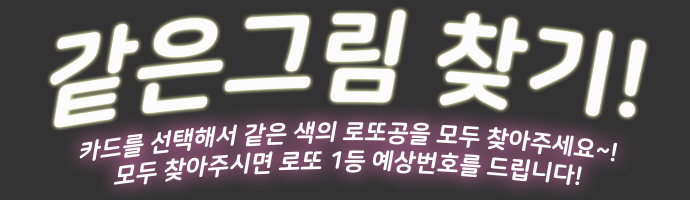
<style>
.page{position:relative;width:690px;height:200px;background:#333333}
.page>*{position:absolute;margin:0}
.t1{font:100px "NanumSquareRoundEB";color:#fcfcfc;font-style:italic}
.t2{font:24px "NanumSquareRoundEB";color:#fcfcfc;font-style:italic}
</style>
<div class="page">
<p class="t1" style="left:50px;top:10px;width:596px;height:118px">같은그림 찾기!</p>
<p class="t2" style="left:79px;top:121px;width:539px;height:65px;text-align:center">카드를 선택해서 같은 색의 로또공을 모두 찾아주세요~!<br>모두 찾아주시면 로또 1등 예상번호를 드립니다!</p>
</div>
